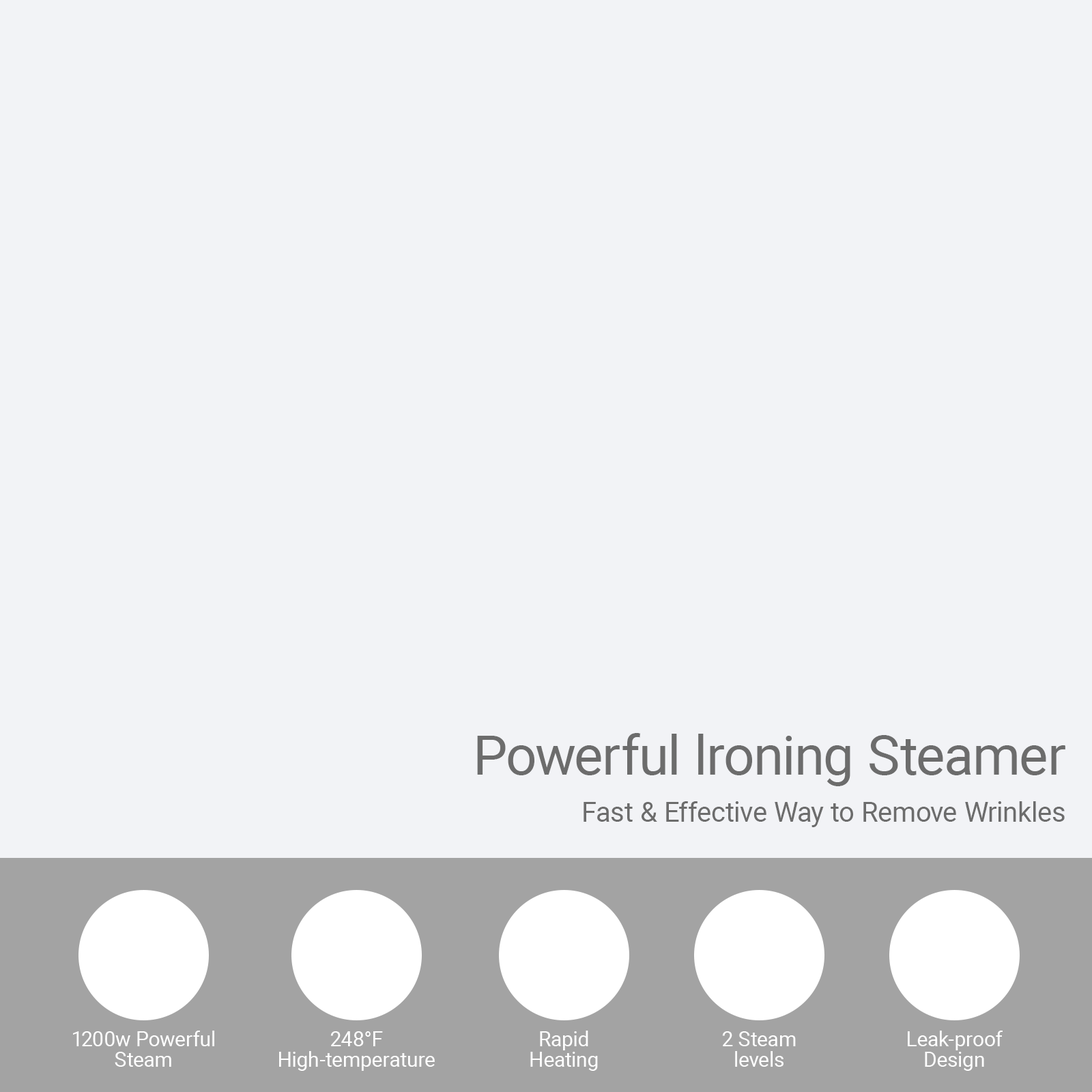
<style>
.page{position:relative;width:1092px;height:1092px;background:#f2f3f6}
.page>*{position:absolute;margin:0}
.t1{font:54.6px "Roboto-Regular";color:#6c6c6c}
.t2{font:27.3px "Roboto-Regular";color:#6c6c6c}
.t3{font:20.5px/20.5px "Roboto-Regular";color:#ffffff}
</style>
<div class="page">
<p class="t1" style="left:477px;top:733px;width:588px;height:53px">Powerful lroning Steamer</p>
<p class="t2" style="left:584px;top:801px;width:481px;height:26px">Fast &amp; Effective Way to Remove Wrinkles</p>
<p class="t3" style="left:73px;top:1031px;width:141px;height:36px;text-align:center">1200w Powerful<br>Steam</p>
<p class="t3" style="left:279px;top:1031px;width:156px;height:40px;text-align:center">248°F<br>High-temperature</p>
<p class="t3" style="left:530px;top:1031px;width:68px;height:40px;text-align:center">Rapid<br>Heating</p>
<p class="t3" style="left:722px;top:1031px;width:74px;height:36px;text-align:center">2 Steam<br>levels</p>
<p class="t3" style="left:908px;top:1031px;width:95px;height:40px;text-align:center">Leak-proof<br>Design</p>
</div>
